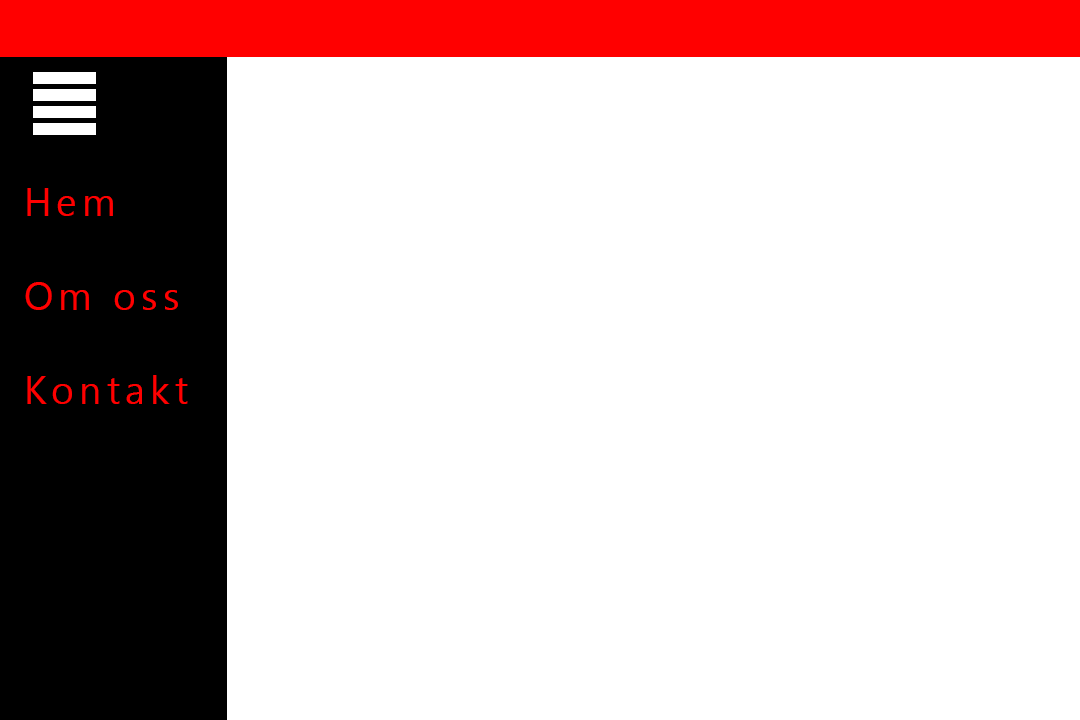
<style>
.page{position:relative;width:1080px;height:720px;background:#ffffff}
.page>*{position:absolute;margin:0}
.t1{font:39.2px "Gadugi";letter-spacing:0.13em;color:#ff0000}
</style>
<div class="page">
<p class="t1" style="left:25px;top:188px;width:163px;height:216px">Hem<br><br>Om oss<br><br>Kontakt</p>
</div>
